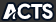
<style>
.page{position:relative;width:56px;height:22px;background:#333333}
.page>*{position:absolute;margin:0}
.t1{font:19.9px "ProductSans-Bold";letter-spacing:-0.025em;color:#ffffff}
</style>
<div class="page">
<p class="t1" style="left:17px;top:3px;width:36px;height:16px">CTS</p>
</div>
